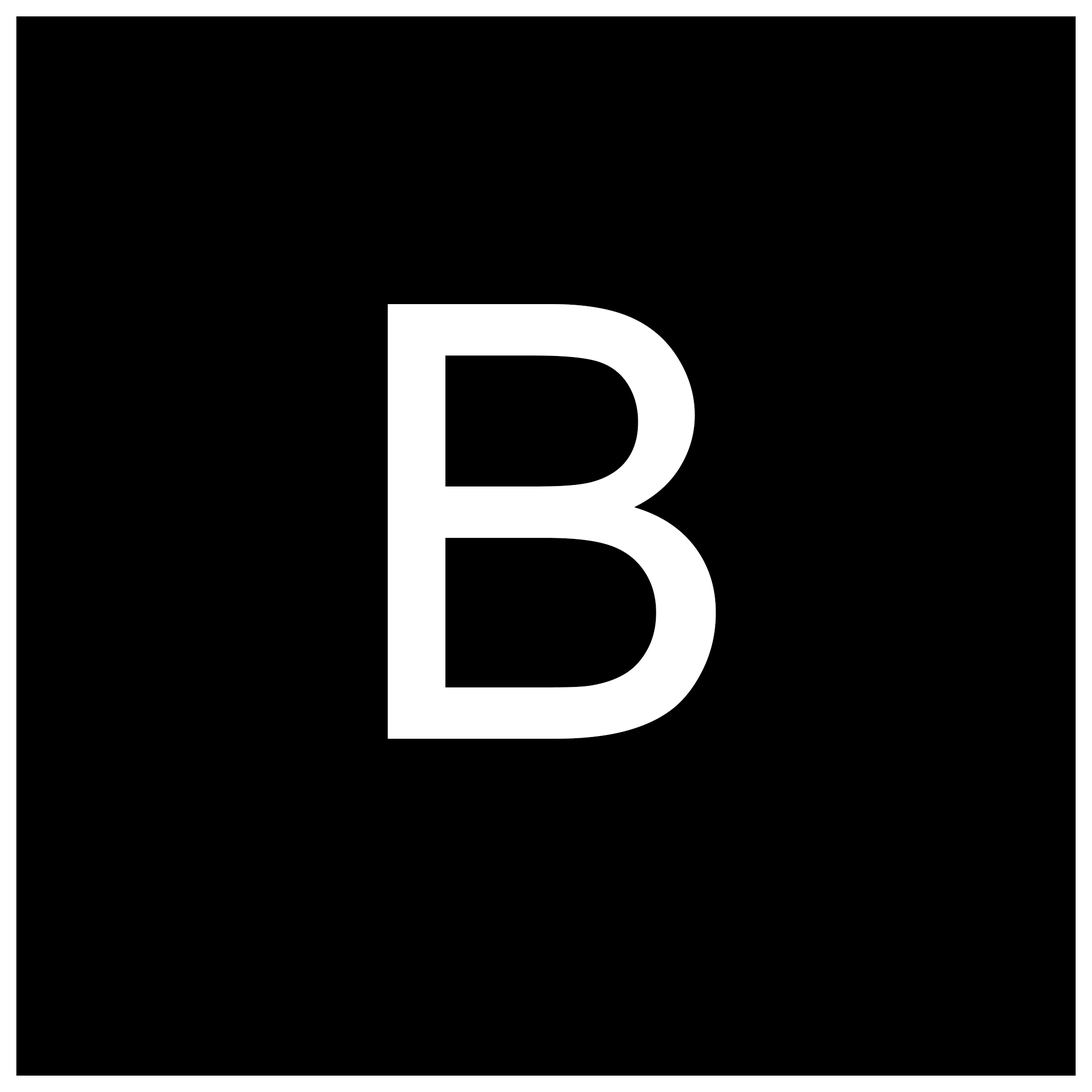
<style>
.page{position:relative;width:1092px;height:1092px;background:#000000}
.page>*{position:absolute;margin:0}
.t1{font:606.7px "ArialMT";color:#ffffff}
</style>
<div class="page">
<p class="t1" style="left:388px;top:304px;width:328px;height:435px">B</p>
</div>
